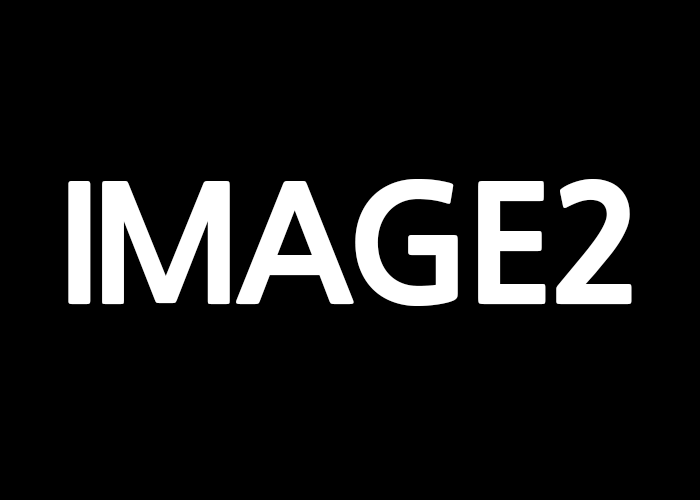
<style>
.page{position:relative;width:700px;height:500px;background:#000000}
.page>*{position:absolute;margin:0}
.t1{font:160px "NanumGothicExtraBold";letter-spacing:-0.05em;color:#ffffff;text-transform:uppercase}
</style>
<div class="page">
<p class="t1" style="left:68px;top:179px;width:564px;height:127px">IMAGE2</p>
</div>
